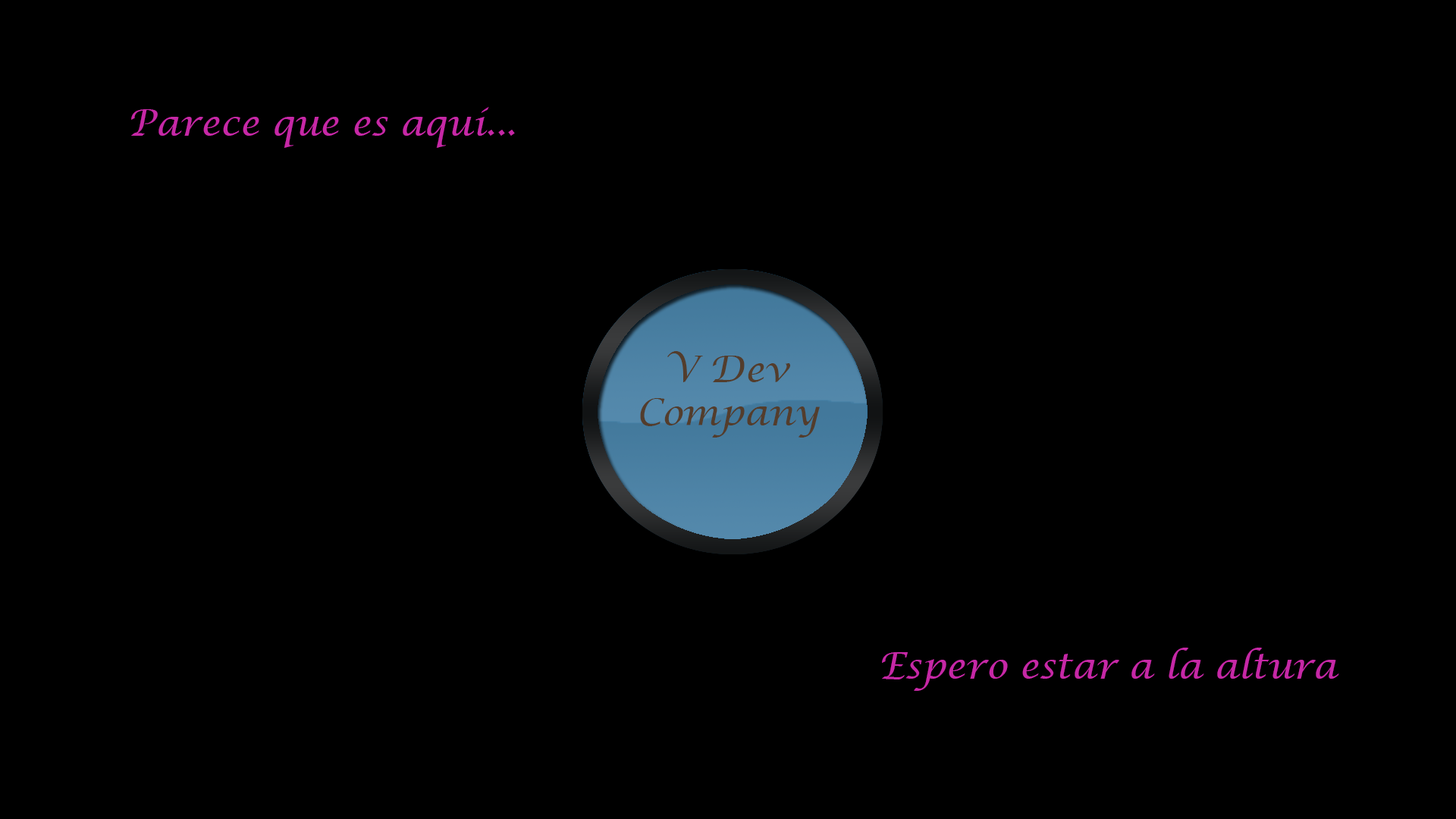
<style>
.page{position:relative;width:1456px;height:819px;background:#000000}
.page>*{position:absolute;margin:0}
.t1{font:36.4px "LucidaCalligraphy-Italic";color:#c628a6}
.t2{font:36.4px "LucidaCalligraphy-Italic";color:#533d2c}
</style>
<div class="page">
<p class="t1" style="left:131px;top:107px;width:384px;height:41px">Parece que es aquí...</p>
<p class="t2" style="left:640px;top:351px;width:180px;height:87px;text-align:center">V Dev<br>Company</p>
<p class="t1" style="left:882px;top:648px;width:457px;height:43px">Espero estar a la altura</p>
</div>
